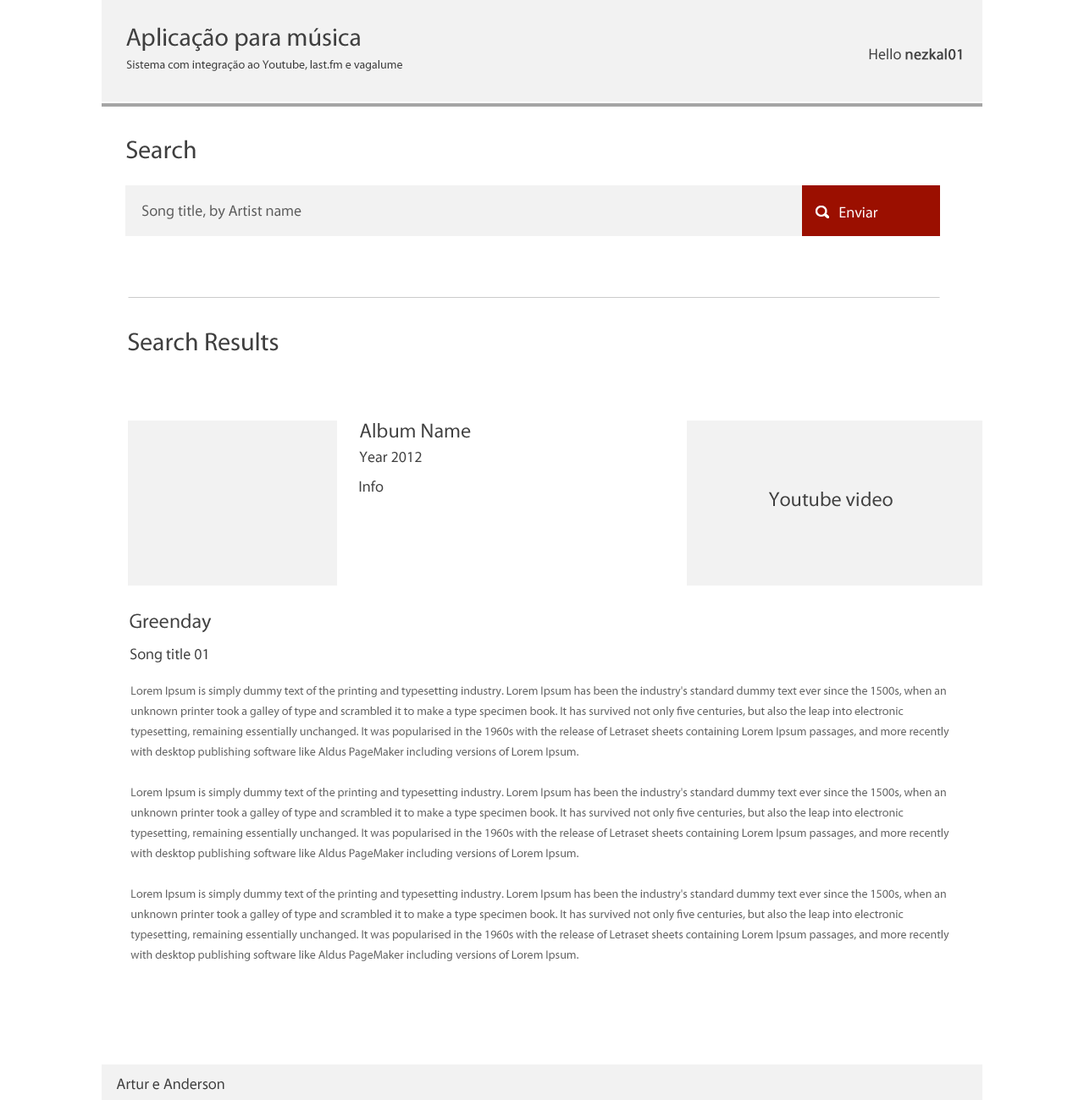
<style>
.page{position:relative;width:1084px;height:1100px;background:#ffffff}
.page>*{position:absolute;margin:0}
.t1{font:25.4px "MyriadPro-Regular";color:#3f3f3f}
.t2{font:15.2px "MyriadPro-Regular";color:#3f3f3f;font-weight:bold}
.t3{font:15.2px "MyriadPro-Regular";color:#3f3f3f}
.t4{font:11.9px "MyriadPro-Regular";color:#3f3f3f}
.t5{font:15.2px "MyriadPro-Regular";color:#5c5c5c}
.t6{font:15.2px "MyriadPro-Regular";color:#ffffff}
.t7{font:20.3px "MyriadPro-Regular";color:#3f3f3f}
.t8{font:11.9px/20.3px "MyriadPro-Regular";color:#656565}
</style>
<div class="page">
<p class="t1" style="left:126px;top:27px;width:234px;height:25px">Aplicação para música</p>
<p class="t2" style="left:869px;top:48px;width:93px;height:12px"><span class="t3">Hello </span>nezkal01</p>
<p class="t4" style="left:126px;top:60px;width:276px;height:11px">Sistema com integração ao Youtube, last.fm e vagalume</p>
<p class="t1" style="left:126px;top:140px;width:70px;height:19px">Search</p>
<p class="t5" style="left:142px;top:205px;width:159px;height:14px">Song title, by Artist name</p>
<p class="t6" style="left:839px;top:207px;width:39px;height:11px">Enviar</p>
<p class="t1" style="left:128px;top:332px;width:151px;height:19px">Search Results</p>
<p class="t7" style="left:360px;top:423px;width:111px;height:16px">Album Name</p>
<p class="t3" style="left:359px;top:451px;width:63px;height:12px">Year 2012</p>
<p class="t3" style="left:359px;top:481px;width:24px;height:12px">Info</p>
<p class="t7" style="left:769px;top:492px;width:123px;height:15px">Youtube video</p>
<p class="t7" style="left:130px;top:614px;width:82px;height:19px">Greenday</p>
<p class="t3" style="left:130px;top:648px;width:77px;height:15px">Song title 01</p>
<p class="t8" style="left:130px;top:687px;width:819px;height:275px">Lorem Ipsum is simply dummy text of the printing and typesetting industry. Lorem Ipsum has been the industry's standard dummy text ever since the 1500s, when an unknown printer took a galley of type and scrambled it to make a type specimen book. It has survived not only five centuries, but also the leap into electronic typesetting, remaining essentially unchanged. It was popularised in the 1960s with the release of Letraset sheets containing Lorem Ipsum passages, and more recently with desktop publishing software like Aldus PageMaker including versions of Lorem Ipsum.<br><br>Lorem Ipsum is simply dummy text of the printing and typesetting industry. Lorem Ipsum has been the industry's standard dummy text ever since the 1500s, when an unknown printer took a galley of type and scrambled it to make a type specimen book. It has survived not only five centuries, but also the leap into electronic typesetting, remaining essentially unchanged. It was popularised in the 1960s with the release of Letraset sheets containing Lorem Ipsum passages, and more recently with desktop publishing software like Aldus PageMaker including versions of Lorem Ipsum.<br><br>Lorem Ipsum is simply dummy text of the printing and typesetting industry. Lorem Ipsum has been the industry's standard dummy text ever since the 1500s, when an unknown printer took a galley of type and scrambled it to make a type specimen book. It has survived not only five centuries, but also the leap into electronic typesetting, remaining essentially unchanged. It was popularised in the 1960s with the release of Letraset sheets containing Lorem Ipsum passages, and more recently with desktop publishing software like Aldus PageMaker including versions of Lorem Ipsum.</p>
<p class="t3" style="left:116px;top:1078px;width:108px;height:12px">Artur e Anderson</p>
</div>
